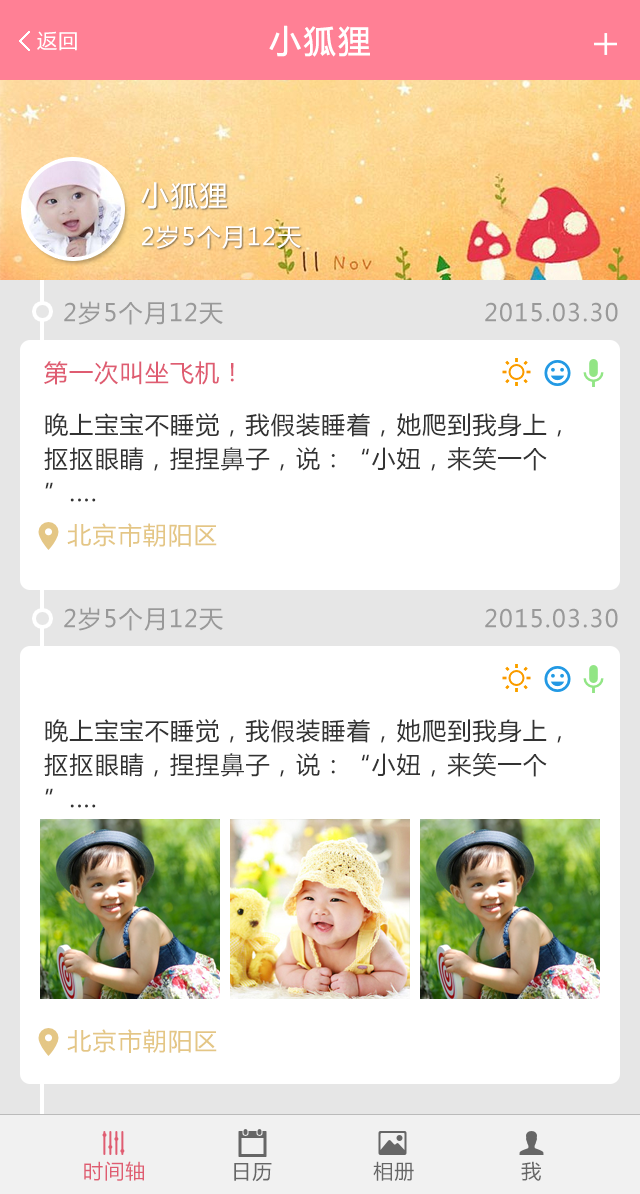
<style>
.page{position:relative;width:640px;height:1194px;background:#ffffff}
.page>*{position:absolute;margin:0}
.t1{font:32px "MicrosoftYaHei";letter-spacing:0.05em;color:#ffffff;font-weight:bold}
.t2{font:20px "MicrosoftYaHei";letter-spacing:0.05em;color:#ffffff}
.t3{font:28px "MicrosoftYaHei";letter-spacing:0.05em;color:#ffffff}
.t4{font:24px "MicrosoftYaHei";letter-spacing:0.05em;color:#ffffff}
.t5{font:24px "MicrosoftYaHei";letter-spacing:0.05em;color:#999999}
.t6{font:24px "MicrosoftYaHei";letter-spacing:0.05em;color:#df5c71}
.t7{font:24px/34px "MicrosoftYaHei";letter-spacing:0.05em;color:#333333}
.t8{font:24px "MicrosoftYaHei";letter-spacing:0.05em;color:#e4c685}
.t9{font:20px "MicrosoftYaHei";letter-spacing:0.05em;color:#df5c71}
.t10{font:20px "MicrosoftYaHei";letter-spacing:0.05em;color:#666666}
</style>
<div class="page">
<p class="t1" style="left:269px;top:25px;width:101px;height:32px">小狐狸</p>
<p class="t2" style="left:37px;top:31px;width:40px;height:20px">返回</p>
<p class="t3" style="left:141px;top:182px;width:86px;height:27px">小狐狸</p>
<p class="t4" style="left:142px;top:225px;width:159px;height:24px">2岁5个月12天</p>
<p class="t5" style="left:64px;top:301px;width:159px;height:24px">2岁5个月12天</p>
<p class="t5" style="left:485px;top:302px;width:133px;height:20px">2015.03.30</p>
<p class="t6" style="left:44px;top:361px;width:190px;height:24px">第一次叫坐飞机！</p>
<p class="t7" style="left:44px;top:413px;width:517px;height:89px">晚上宝宝不睡觉，我假装睡着，她爬到我身上，抠抠眼睛，捏捏鼻子，说：“小妞，来笑一个”....</p>
<p class="t8" style="left:67px;top:523px;width:150px;height:24px">北京市朝阳区</p>
<p class="t5" style="left:64px;top:607px;width:159px;height:24px">2岁5个月12天</p>
<p class="t5" style="left:485px;top:608px;width:133px;height:20px">2015.03.30</p>
<p class="t7" style="left:44px;top:719px;width:517px;height:89px">晚上宝宝不睡觉，我假装睡着，她爬到我身上，抠抠眼睛，捏捏鼻子，说：“小妞，来笑一个”....</p>
<p class="t8" style="left:67px;top:1029px;width:150px;height:24px">北京市朝阳区</p>
<p class="t9" style="left:84px;top:1161px;width:60px;height:20px">时间轴</p>
<p class="t10" style="left:234px;top:1163px;width:38px;height:19px">日历</p>
<p class="t10" style="left:373px;top:1161px;width:41px;height:20px">相册</p>
<p class="t10" style="left:521px;top:1161px;width:20px;height:20px">我</p>
</div>
